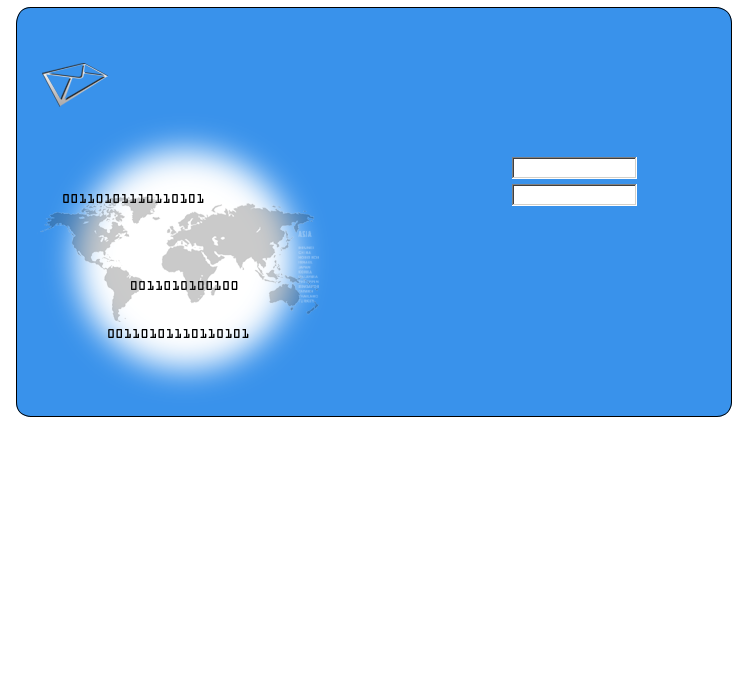
<style>
.page{position:relative;width:750px;height:700px;background:#ffffff}
.page>*{position:absolute;margin:0}
.t1{font:13.9px "OCRAExtended";color:#000000}
</style>
<div class="page">
<p class="t1" style="left:63px;top:194px;width:141px;height:9px">00110101110110101</p>
<p class="t1" style="left:131px;top:281px;width:107px;height:9px">0011010100100</p>
<p class="t1" style="left:108px;top:329px;width:141px;height:9px">00110101110110101</p>
</div>
